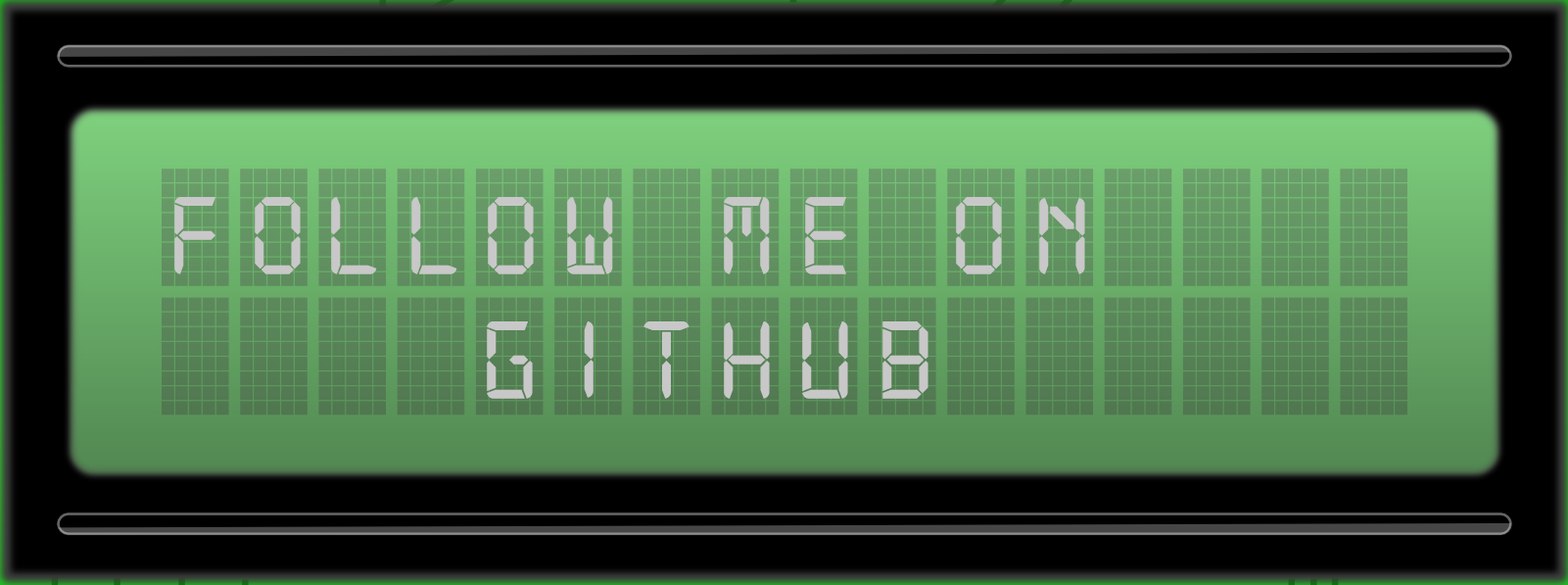
<style>
.page{position:relative;width:1568px;height:585px;background:#000000}
.page>*{position:absolute;margin:0}
.t1{font:117.5px "Digital-7Mono";color:#c8c8c8}
</style>
<div class="page">
<p class="t1" style="left:174px;top:197px;width:41px;height:77px">F</p>
<p class="t1" style="left:255px;top:197px;width:46px;height:77px">o</p>
<p class="t1" style="left:331px;top:197px;width:46px;height:77px">l</p>
<p class="t1" style="left:411px;top:197px;width:46px;height:77px">l</p>
<p class="t1" style="left:488px;top:197px;width:46px;height:77px">o</p>
<p class="t1" style="left:567px;top:197px;width:46px;height:77px">w</p>
<p class="t1" style="left:724px;top:197px;width:46px;height:77px">M</p>
<p class="t1" style="left:805px;top:197px;width:41px;height:77px">e</p>
<p class="t1" style="left:956px;top:197px;width:46px;height:77px">o</p>
<p class="t1" style="left:1039px;top:198px;width:46px;height:76px">n</p>
<p class="t1" style="left:487px;top:321px;width:46px;height:78px">g</p>
<p class="t1" style="left:584px;top:321px;width:10px;height:77px">i</p>
<p class="t1" style="left:643px;top:321px;width:46px;height:78px">t</p>
<p class="t1" style="left:724px;top:321px;width:46px;height:78px">h</p>
<p class="t1" style="left:802px;top:321px;width:46px;height:78px">u</p>
<p class="t1" style="left:882px;top:321px;width:46px;height:78px">b</p>
</div>
